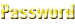
<style>
.page{position:relative;width:75px;height:25px;background:#ffffff}
.page>*{position:absolute;margin:0}
.t1{font:18.7px "Impact"}
</style>
<div class="page">
<p class="t1" style="left:1px;top:4px;width:74px;height:15px">Password</p>
</div>
